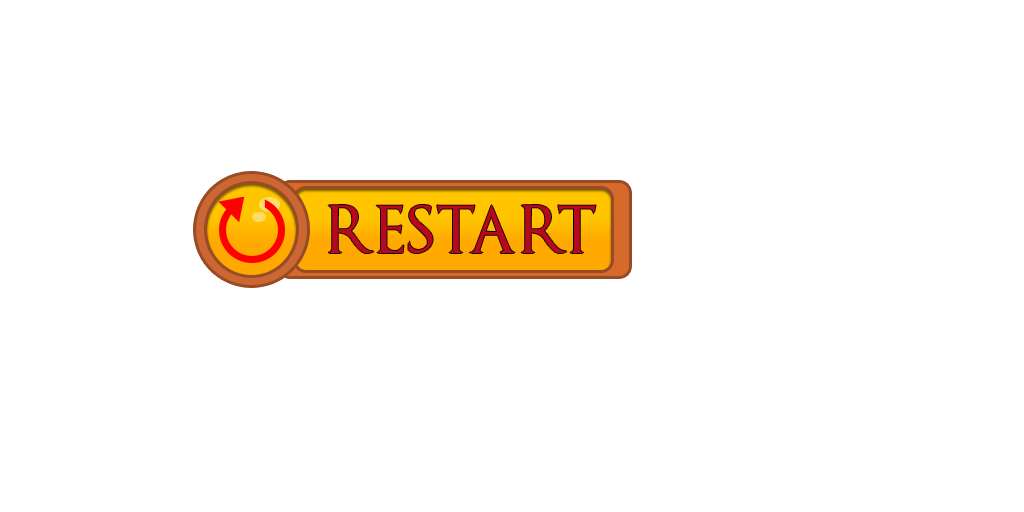
<style>
.page{position:relative;width:1024px;height:512px;background:#ffffff}
.page>*{position:absolute;margin:0}
.t1{font:48px "GameofThrones";letter-spacing:0.05em;color:#b7081e}
</style>
<div class="page">
<p class="t1" style="left:328px;top:205px;width:268px;height:48px">RESTART</p>
</div>
